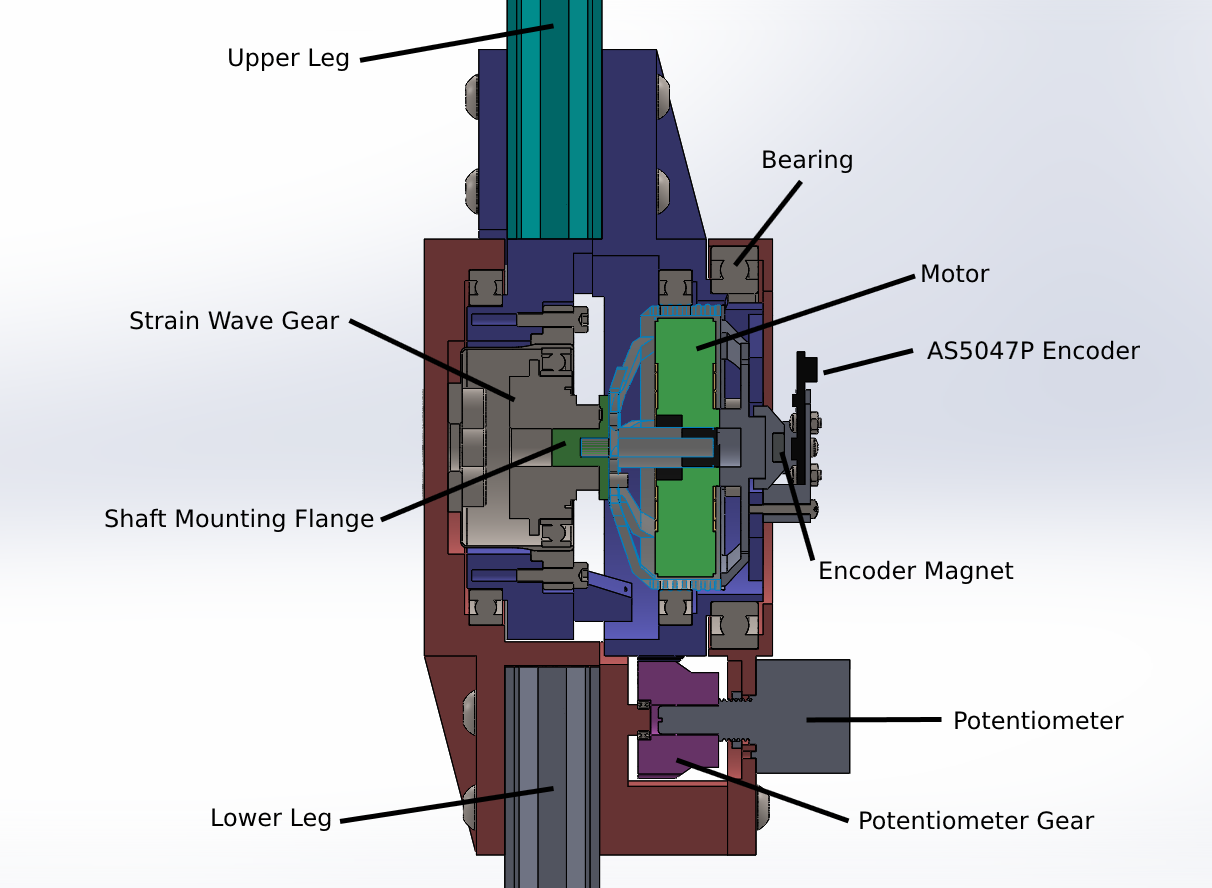
<style>
.page{position:relative;width:1212px;height:888px}
.page>*{position:absolute;margin:0}
.t1{font:24px "DejaVuSans";color:#000000}
</style>
<div class="page">
<p class="t1" style="left:229px;top:48px;width:120px;height:23px">Upper Leg</p>
<p class="t1" style="left:763px;top:149px;width:89px;height:24px">Bearing</p>
<p class="t1" style="left:922px;top:264px;width:68px;height:19px">Motor</p>
<p class="t1" style="left:130px;top:310px;width:210px;height:20px">Strain Wave Gear</p>
<p class="t1" style="left:927px;top:340px;width:213px;height:20px">AS5047P Encoder</p>
<p class="t1" style="left:105px;top:508px;width:269px;height:24px">Shaft Mounting Flange</p>
<p class="t1" style="left:820px;top:560px;width:194px;height:24px">Encoder Magnet</p>
<p class="t1" style="left:955px;top:710px;width:169px;height:20px">Potentiometer</p>
<p class="t1" style="left:212px;top:808px;width:119px;height:23px">Lower Leg</p>
<p class="t1" style="left:860px;top:810px;width:235px;height:20px">Potentiometer Gear</p>
</div>
